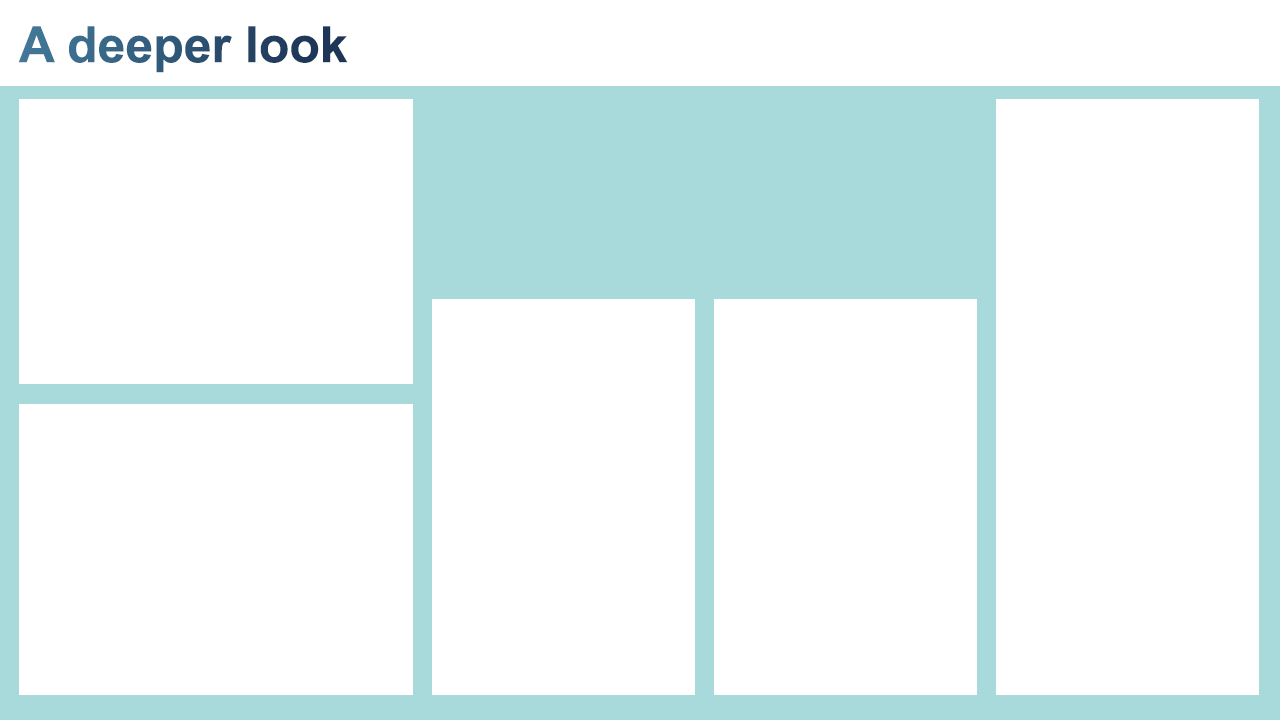
<style>
.page{position:relative;width:1280px;height:720px;background:#ffffff}
.page>*{position:absolute;margin:0}
.t1{font:50px "Arial-BoldMT"}
</style>
<div class="page">
<p class="t1" style="left:18px;top:26px;width:330px;height:47px">A deeper look</p>
</div>
